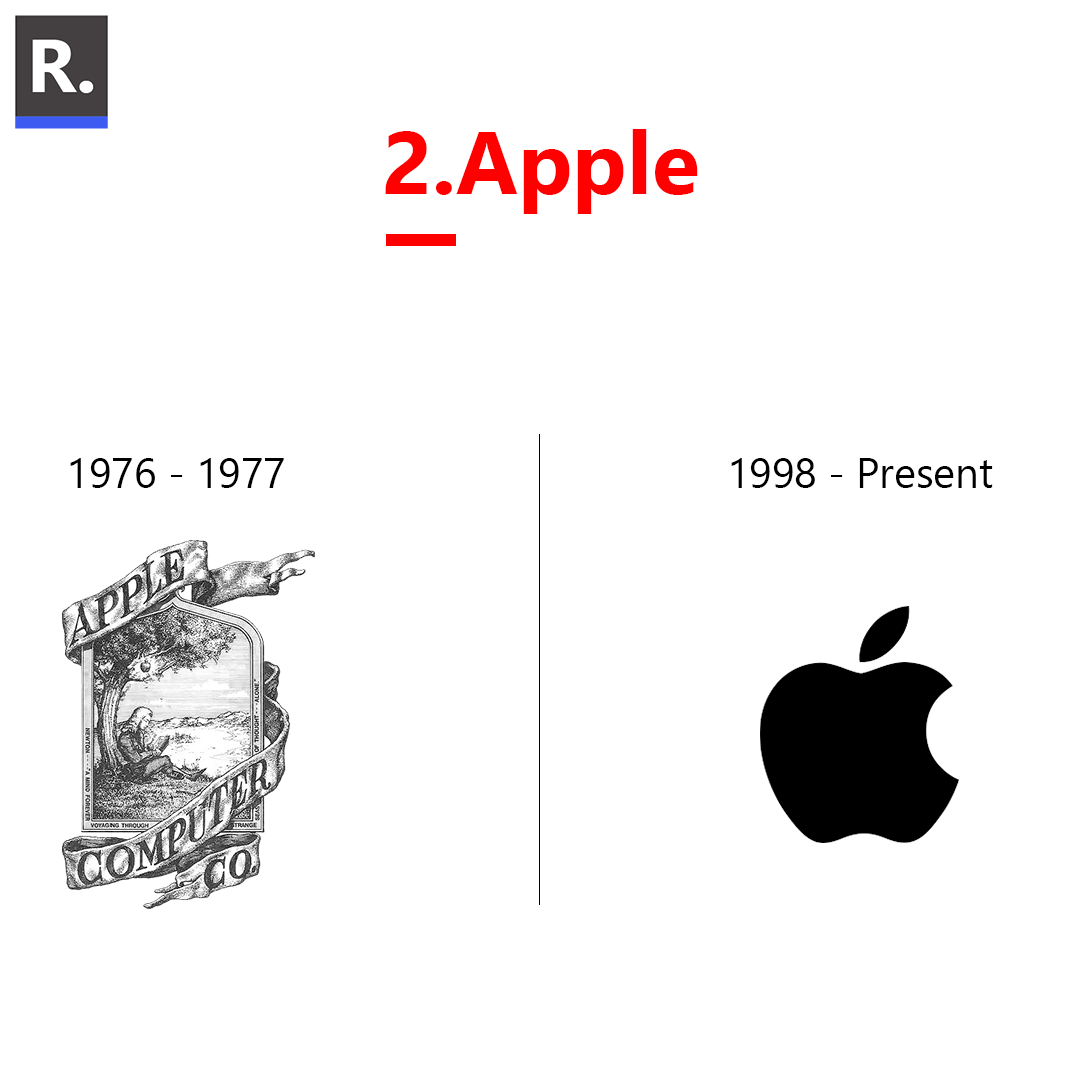
<style>
.page{position:relative;width:1080px;height:1080px;background:#ffffff}
.page>*{position:absolute;margin:0}
.t1{font:87.8px "SegoeUI-Bold";color:#ff0000}
.t2{font:41.7px "SegoeUI";color:#000000}
</style>
<div class="page">
<p class="t1" style="left:385px;top:129px;width:313px;height:85px">2.Apple</p>
<p class="t2" style="left:70px;top:458px;width:214px;height:30px">1976 - 1977</p>
<p class="t2" style="left:731px;top:458px;width:262px;height:30px">1998 - Present</p>
</div>
